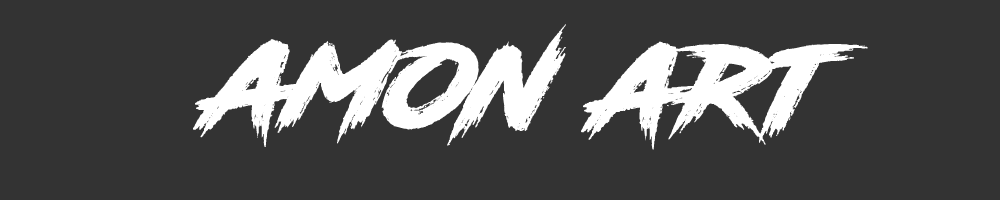
<style>
.page{position:relative;width:1000px;height:200px;background:#333333}
.page>*{position:absolute;margin:0}
.t1{font:124.2px "RoadRage";letter-spacing:-0.01em;color:#ffffff;scale:1.06 1}
</style>
<div class="page">
<p class="t1" style="left:193px;top:24px;width:675px;height:126px">amon_art</p>
</div>
